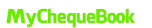
<style>
.page{position:relative;width:152px;height:28px;background:#ffffff}
.page>*{position:absolute;margin:0}
.t1{font:18.7px "FacebookLetterFaces";letter-spacing:-0.025em;color:#6aeb01}
</style>
<div class="page">
<p class="t1" style="left:6px;top:8px;width:129px;height:20px">MyChequeBook</p>
</div>
